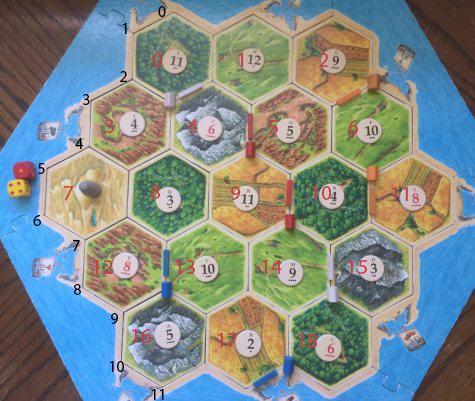
<style>
.page{position:relative;width:475px;height:401px}
.page>*{position:absolute;margin:0}
.t1{font:16px "MyriadPro-Regular";color:#000000}
.t2{font:21.3px "MyriadPro-Regular";color:#c63e3e}
</style>
<div class="page">
<p class="t1" style="left:158px;top:6px;width:8px;height:11px">0</p>
<p class="t1" style="left:123px;top:23px;width:4px;height:11px">1</p>
<p class="t2" style="left:152px;top:53px;width:11px;height:14px">0</p>
<p class="t2" style="left:238px;top:53px;width:6px;height:14px">1</p>
<p class="t2" style="left:319px;top:53px;width:10px;height:14px">2</p>
<p class="t1" style="left:120px;top:71px;width:7px;height:11px">2</p>
<p class="t1" style="left:83px;top:94px;width:7px;height:11px">3</p>
<p class="t2" style="left:105px;top:119px;width:9px;height:14px">3</p>
<p class="t2" style="left:187px;top:119px;width:11px;height:14px">4</p>
<p class="t2" style="left:269px;top:120px;width:9px;height:14px">5</p>
<p class="t2" style="left:348px;top:120px;width:11px;height:14px">6</p>
<p class="t1" style="left:75px;top:138px;width:8px;height:11px">4</p>
<p class="t1" style="left:38px;top:163px;width:7px;height:11px">5</p>
<p class="t2" style="left:150px;top:185px;width:11px;height:14px">8</p>
<p class="t2" style="left:64px;top:186px;width:9px;height:14px">7</p>
<p class="t2" style="left:230px;top:186px;width:11px;height:14px">9</p>
<p class="t2" style="left:312px;top:186px;width:20px;height:14px">10</p>
<p class="t2" style="left:392px;top:187px;width:16px;height:14px">11</p>
<p class="t1" style="left:33px;top:215px;width:8px;height:11px">6</p>
<p class="t1" style="left:73px;top:240px;width:7px;height:11px">7</p>
<p class="t2" style="left:93px;top:260px;width:20px;height:14px">12</p>
<p class="t2" style="left:176px;top:260px;width:19px;height:14px">13</p>
<p class="t2" style="left:262px;top:260px;width:20px;height:14px">14</p>
<p class="t2" style="left:348px;top:260px;width:19px;height:14px">155</p>
<p class="t1" style="left:74px;top:284px;width:7px;height:11px">8</p>
<p class="t1" style="left:111px;top:313px;width:7px;height:11px">9</p>
<p class="t2" style="left:132px;top:329px;width:20px;height:14px">16</p>
<p class="t2" style="left:218px;top:333px;width:19px;height:14px">17</p>
<p class="t2" style="left:298px;top:334px;width:20px;height:14px">18</p>
<p class="t1" style="left:110px;top:361px;width:14px;height:11px">10</p>
<p class="t1" style="left:152px;top:389px;width:12px;height:11px">11</p>
</div>
